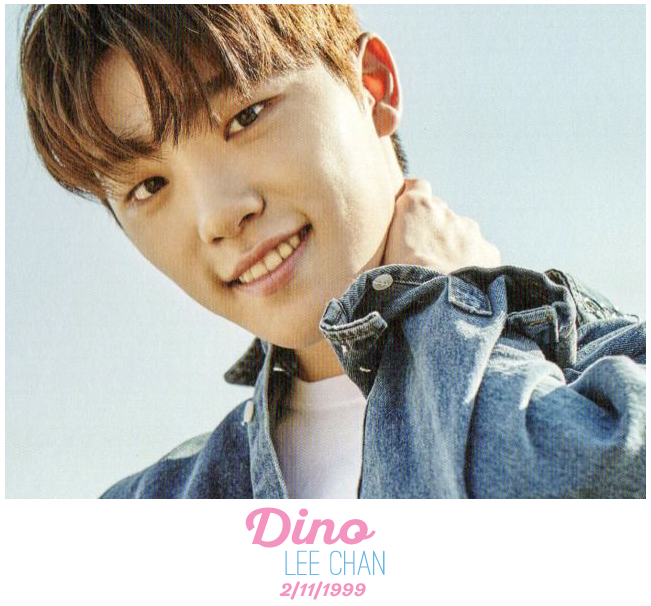
<style>
.page{position:relative;width:651px;height:606px}
.page>*{position:absolute;margin:0}
.t1{font:48px "SantEliaScript-BoldDMO";color:#f394c0;scale:1.1 1}
.t2{font:36px "OstrichSansRounded-Medium";color:#68b7e3;scale:1.1 1}
.t3{font:18px "SantEliaScript-BoldDMO";color:#f394c0;scale:1.1 1}
.t4{font:18px "SansitaOne";color:#f394c0;scale:1.1 1}
</style>
<div class="page">
<p class="t1" style="left:245px;top:507px;width:131px;height:41px">Dino</p>
<p class="t2" style="left:285px;top:550px;width:100px;height:25px">lee chan</p>
<p class="t3" style="left:279px;top:581px;width:87px;height:19px">2<span class="t4">/</span>11<span class="t4">/</span>1999</p>
</div>
